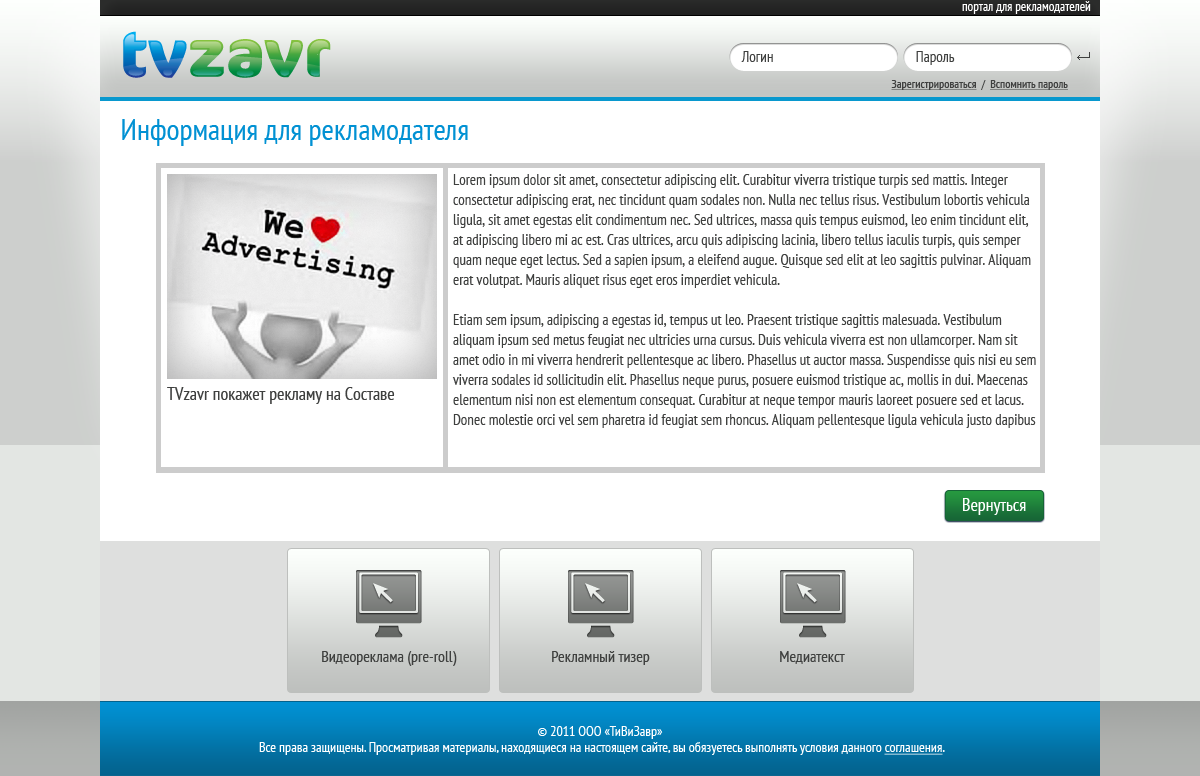
<style>
.page{position:relative;width:1200px;height:776px;background:#ffffff}
.page>*{position:absolute;margin:0}
.t1{font:13px "PTSans-Narrow";color:#ffffff}
.t2{font:15px "PTSans-Narrow";color:#3f403f}
.t3{font:12px "PTSans-Narrow";color:#3f403f;text-decoration:underline}
.t4{font:12px "PTSans-Narrow";color:#3f403f}
.t5{font:30px "PTSans-Narrow";color:#0191d3}
.t6{font:15px/20px "PTSans-Narrow";color:#3f403f}
.t7{font:18px "PTSans-Narrow";color:#3f403f}
.t8{font:18px "PTSans-Narrow";color:#ffffff}
.t9{font:16px "PTSans-Narrow";color:#3f403f}
.t10{font:14px/16px "PTSans-Narrow";color:#ffffff}
.t11{font:14px/16px "PTSans-Narrow";color:#ffffff;text-decoration:underline}
</style>
<div class="page">
<p class="t1" style="left:962px;top:1px;width:129px;height:13px">портал для рекламодателей</p>
<p class="t2" style="left:741px;top:51px;width:32px;height:11px">Логин</p>
<p class="t2" style="left:916px;top:51px;width:39px;height:14px">Пароль</p>
<p class="t3" style="left:891px;top:80px;width:177px;height:10px">Зарегистрироваться<span class="t4">  /  </span>Вспомнить пароль</p>
<p class="t5" style="left:122px;top:119px;width:346px;height:27px">Информация для рекламодателя</p>
<p class="t6" style="left:452px;top:174px;width:584px;height:254px">Lorem ipsum dolor sit amet, consectetur adipiscing elit. Curabitur viverra tristique turpis sed mattis. Integer consectetur adipiscing erat, nec tincidunt quam sodales non. Nulla nec tellus risus. Vestibulum lobortis vehicula ligula, sit amet egestas elit condimentum nec. Sed ultrices, massa quis tempus euismod, leo enim tincidunt elit, at adipiscing libero mi ac est. Cras ultrices, arcu quis adipiscing lacinia, libero tellus iaculis turpis, quis semper quam neque eget lectus. Sed a sapien ipsum, a eleifend augue. Quisque sed elit at leo sagittis pulvinar. Aliquam erat volutpat. Mauris aliquet risus eget eros imperdiet vehicula.<br><br>Etiam sem ipsum, adipiscing a egestas id, tempus ut leo. Praesent tristique sagittis malesuada. Vestibulum aliquam ipsum sed metus feugiat nec ultricies urna cursus. Duis vehicula viverra est non ullamcorper. Nam sit amet odio in mi viverra hendrerit pellentesque ac libero. Phasellus ut auctor massa. Suspendisse quis nisi eu sem viverra sodales id sollicitudin elit. Phasellus neque purus, posuere euismod tristique ac, mollis in dui. Maecenas elementum nisi non est elementum consequat. Curabitur at neque tempor mauris laoreet posuere sed et lacus. Donec molestie orci vel sem pharetra id feugiat sem rhoncus. Aliquam pellentesque ligula vehicula justo dapibus in luctus nulla dignissim. Fusce consectetur, massa at porttitor semper, orci neque feugiat nisi, congue gravida nisl velit a magna. Etiam sit amet ante nec enim feugiat blandit. In in sapien nec dolor aliquet dapibus vitae nec lectus.</p>
<p class="t7" style="left:167px;top:387px;width:228px;height:17px">TVzavr покажет рекламу на Составе</p>
<p class="t8" style="left:963px;top:498px;width:63px;height:17px">Вернуться</p>
<p class="t9" style="left:322px;top:651px;width:135px;height:15px">Видеореклама (pre-roll)</p>
<p class="t9" style="left:552px;top:651px;width:98px;height:14px">Рекламный тизер</p>
<p class="t9" style="left:780px;top:651px;width:65px;height:13px">Медиатекст</p>
<p class="t10" style="left:259px;top:726px;width:686px;height:29px;text-align:center">© 2011 ООО «ТиВиЗавр»<br> Все права защищены. Просматривая материалы, находящиеся на настоящем сайте, вы обязуетесь выполнять условия данного <span class="t11">соглашения</span>.</p>
</div>
